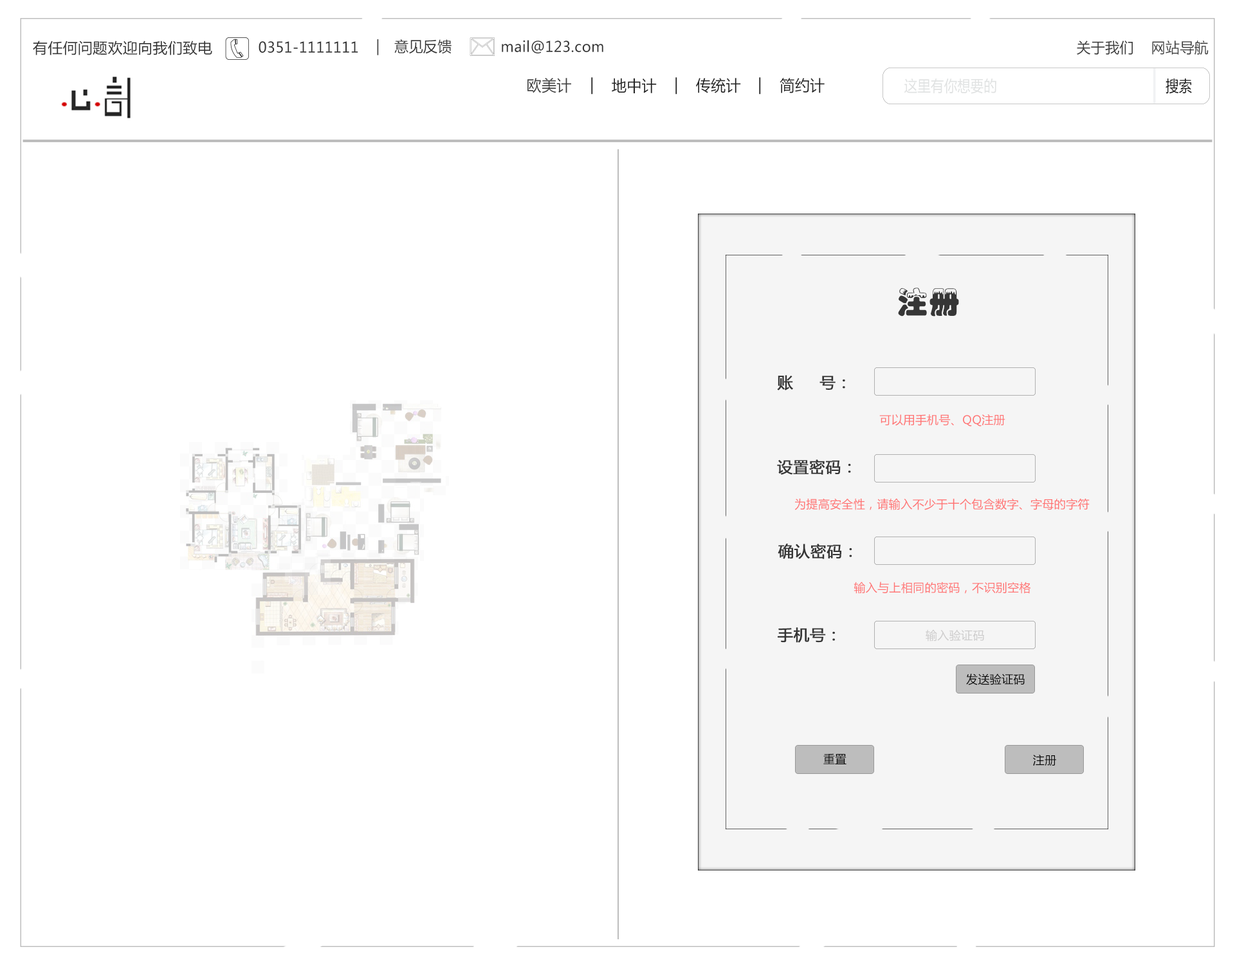
<style>
.page{position:relative;width:1235px;height:965px;background:#ffffff}
.page>*{position:absolute;margin:0}
.t1{font:14.6px "MicrosoftYaHei";letter-spacing:0.02em;color:#363636}
.t2{font:14.6px "MicrosoftYaHei";letter-spacing:0.02em;color:#363636;scale:0.96 1}
.t3{font:14.6px "MicrosoftYaHei";letter-spacing:0.02em;color:#3f3f3f;scale:0.96 1}
.t4{font:15.4px "MicrosoftYaHei";letter-spacing:0.02em;color:#3f3f3f;scale:0.96 1}
.t5{font:15.4px "MicrosoftYaHei";letter-spacing:0.02em;color:#242424;scale:0.96 1}
.t6{font:32.2px "MicrosoftYaHei";letter-spacing:0.02em;color:#f1f2f3;scale:0.84 1}
.t7{font:15.4px "MicrosoftYaHei";letter-spacing:0.02em;color:#e0e2e2;scale:0.84 1}
.t8{font:15.4px "MicrosoftYaHei";letter-spacing:0.02em;color:#1e1e1e;scale:0.84 1}
.t9{font:30.9px "JXueFeng";letter-spacing:0.02em;color:#363636}
.t10{font:15.4px "MicrosoftYaHei";letter-spacing:0.02em;color:#363636;font-weight:bold}
.t11{font:11.6px "MicrosoftYaHei";letter-spacing:0.02em;color:#ff7474}
.t12{font:11.6px "MicrosoftYaHei";letter-spacing:0.02em;color:#cdcccc}
.t13{font:11.6px "MicrosoftYaHei";letter-spacing:0.02em;color:#040404}
</style>
<div class="page">
<p class="t1" style="left:33px;top:41px;width:179px;height:14px">有任何问题欢迎向我们致电</p>
<p class="t2" style="left:259px;top:41px;width:99px;height:12px">0351-1111111</p>
<p class="t2" style="left:377px;top:39px;width:2px;height:16px">|</p>
<p class="t2" style="left:394px;top:39px;width:58px;height:15px">意见反馈</p>
<p class="t2" style="left:502px;top:40px;width:102px;height:13px">mail@123.com</p>
<p class="t3" style="left:1077px;top:41px;width:56px;height:14px">关于我们</p>
<p class="t3" style="left:1152px;top:41px;width:57px;height:14px">网站导航</p>
<p class="t4" style="left:528px;top:78px;width:43px;height:15px">欧美计</p>
<p class="t5" style="left:591px;top:77px;width:2px;height:18px">|</p>
<p class="t5" style="left:612px;top:78px;width:45px;height:15px">地中计</p>
<p class="t5" style="left:676px;top:77px;width:2px;height:18px">|</p>
<p class="t5" style="left:696px;top:78px;width:45px;height:15px">传统计</p>
<p class="t5" style="left:759px;top:77px;width:2px;height:18px">|</p>
<p class="t5" style="left:780px;top:78px;width:45px;height:15px">简约计</p>
<p class="t6" style="left:1154px;top:68px;width:2px;height:36px">|</p>
<p class="t7" style="left:905px;top:79px;width:92px;height:15px">这里有你想要的</p>
<p class="t8" style="left:1166px;top:79px;width:26px;height:15px">搜索</p>
<p class="t9" style="left:898px;top:288px;width:61px;height:29px">注册</p>
<p class="t10" style="left:777px;top:375px;width:69px;height:16px">账     号：</p>
<p class="t11" style="left:880px;top:414px;width:126px;height:13px">可以用手机号、QQ注册</p>
<p class="t10" style="left:777px;top:459px;width:74px;height:16px">设置密码：</p>
<p class="t11" style="left:795px;top:499px;width:295px;height:11px">为提高安全性，请输入不少于十个包含数字、字母的字符</p>
<p class="t10" style="left:778px;top:544px;width:75px;height:15px">确认密码：</p>
<p class="t11" style="left:854px;top:582px;width:177px;height:12px">输入与上相同的密码，不识别空格</p>
<p class="t10" style="left:778px;top:627px;width:57px;height:16px">手机号：</p>
<p class="t12" style="left:926px;top:630px;width:58px;height:12px">输入验证码</p>
<p class="t13" style="left:966px;top:674px;width:59px;height:11px">发送验证码</p>
<p class="t13" style="left:824px;top:753px;width:23px;height:11px">重置</p>
<p class="t13" style="left:1033px;top:755px;width:24px;height:11px">注册</p>
</div>
